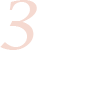
<style>
.page{position:relative;width:100px;height:100px;background:#ffffff}
.page>*{position:absolute;margin:0}
.t1{font:72px "LucidaCalligraphy-Italic";color:#f5d9d0}
</style>
<div class="page">
<p class="t1" style="left:0px;top:0px;width:37px;height:50px">3</p>
</div>
